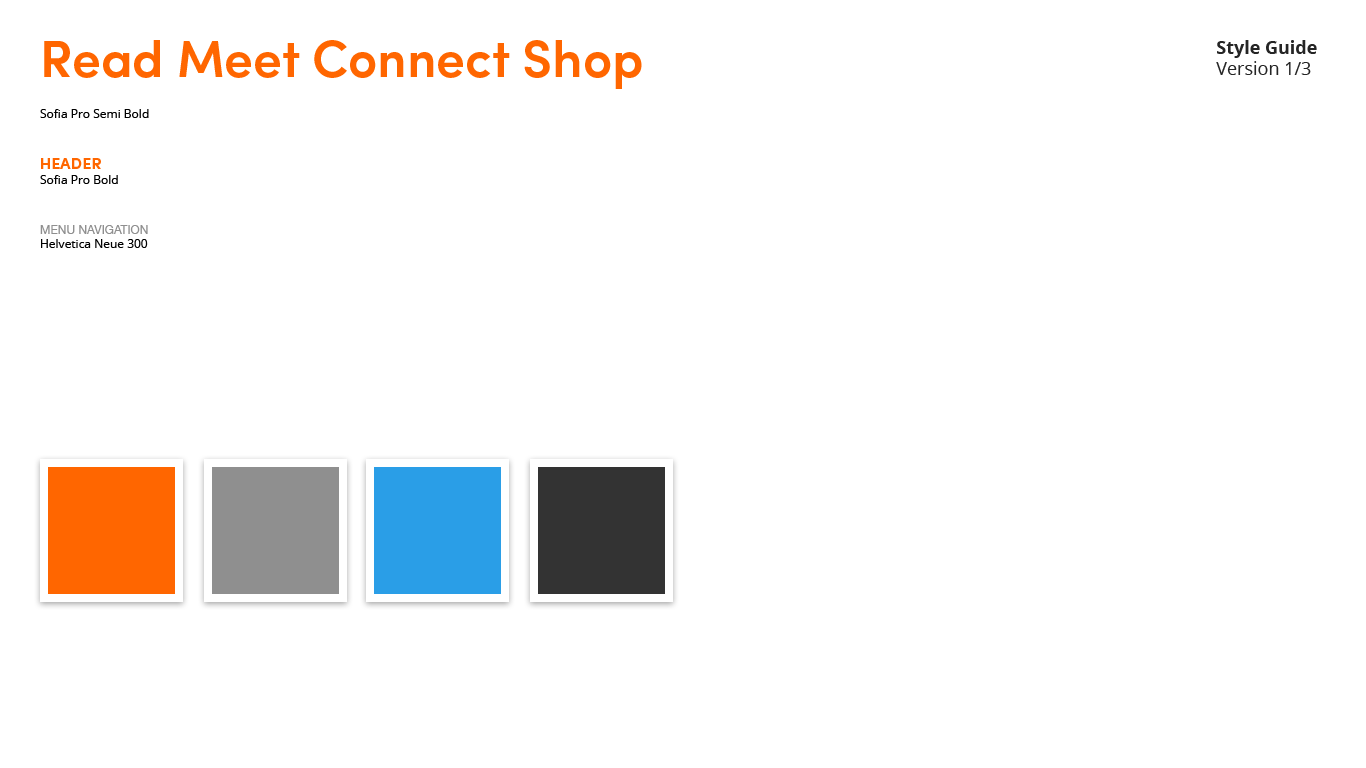
<style>
.page{position:relative;width:1366px;height:768px;background:#ffffff}
.page>*{position:absolute;margin:0}
.t1{font:52px "SofiaProSemiBold";color:#ff6600}
.t2{font:18px "OpenSans-Bold";color:#252525}
.t3{font:18px "OpenSans";color:#252525}
.t4{font:12px "OpenSans";color:#000000}
.t5{font:16px "SofiaProBold";color:#ff6600}
.t6{font:12px "HelveticaNeue";color:#8f8f8f}
</style>
<div class="page">
<p class="t1" style="left:44px;top:40px;width:598px;height:49px">Read Meet Connect Shop</p>
<p class="t2" style="left:1216px;top:40px;width:101px;height:35px">Style Guide<br><span class="t3">Version 1/3</span></p>
<p class="t4" style="left:40px;top:109px;width:109px;height:9px">Sofia Pro Semi Bold</p>
<p class="t4" style="left:40px;top:158px;width:78px;height:26px"><span class="t5">HEADER<br></span>Sofia Pro Bold</p>
<p class="t4" style="left:40px;top:225px;width:108px;height:23px"><span class="t6">MENU NAVIGATION<br></span>Helvetica Neue 300</p>
</div>
